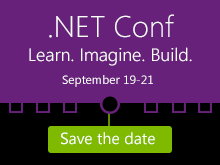
<style>
.page{position:relative;width:220px;height:165px;background:#68217a}
.page>*{position:absolute;margin:0}
.t1{font:18px/24.3px "SegoeUI-Semilight";color:#ffffff}
.t2{font:30px/25.3px "SegoeUI-Light";color:#ffffff}
.t3{font:12px "SegoeUI";color:#ffffff}
.t4{font:14.6px "SegoeUI-Semilight";color:#ffffff}
.t5{font:16px "SegoeUI";color:#ffffff}
</style>
<div class="page">
<p class="t1" style="left:29px;top:14px;width:163px;height:52px;text-align:center"><span class="t2">.NET Conf<br></span>Learn. Imagine. Build.</p>
<p class="t3" style="left:62px;top:75px;width:91px;height:12px"><span class="t4"><br></span>September 19-21</p>
<p class="t5" style="left:61px;top:132px;width:94px;height:13px">Save the date</p>
</div>
